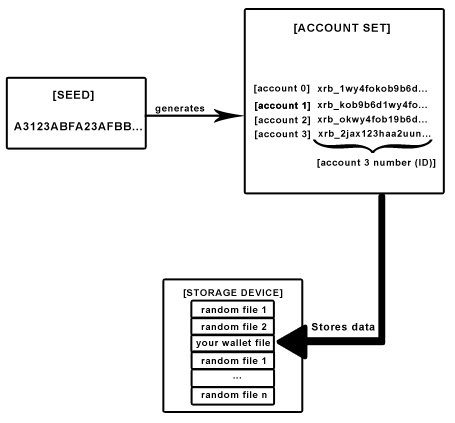
<style>
.page{position:relative;width:455px;height:423px;background:#ffffff}
.page>*{position:absolute;margin:0}
.t1{font:11.4px "Arial-BoldMT";letter-spacing:0.055em;color:#000000}
.t2{font:9.6px "Arial-BoldMT";letter-spacing:0.055em;color:#000000}
.t3{font:11.4px/31.5px "Arial-BoldMT";letter-spacing:0.055em;color:#000000}
.t4{font:131.4px "Centaur";letter-spacing:0.055em;color:#000000;scale:0.38 1}
.t5{font:10.6px "Arial-BoldMT";letter-spacing:0.055em;color:#000000}
.t6{font:9.6px "Arial-BoldMT";letter-spacing:0.055em}
</style>
<div class="page">
<p class="t1" style="left:294px;top:23px;width:96px;height:11px">[ACCOUNT SET]</p>
<p class="t2" style="left:254px;top:84px;width:56px;height:10px">[account 0]</p>
<p class="t2" style="left:317px;top:85px;width:110px;height:9px">xrb_1wy4fokob9b6d...</p>
<p class="t3" style="left:14px;top:90px;width:128px;height:41px">[SEED]<br>A3123ABFA23AFBB...</p>
<p class="t2" style="left:255px;top:102px;width:55px;height:9px">[account 1]</p>
<p class="t2" style="left:255px;top:102px;width:55px;height:9px">[account 1]</p>
<p class="t2" style="left:317px;top:101px;width:110px;height:9px">xrb_kob9b6d1wy4fo...</p>
<p class="t2" style="left:155px;top:104px;width:50px;height:10px">generates</p>
<p class="t2" style="left:255px;top:116px;width:55px;height:10px">[account 2]</p>
<p class="t2" style="left:317px;top:115px;width:110px;height:10px">xrb_okwy4fob19b6d...</p>
<p class="t2" style="left:255px;top:130px;width:55px;height:10px">[account 3]</p>
<p class="t2" style="left:318px;top:130px;width:113px;height:9px">xrb_2jax123haa2uun...</p>
<p class="t4" style="left:313px;top:139px;width:120px;height:14px;rotate:90deg">}</p>
<p class="t2" style="left:317px;top:159px;width:119px;height:9px">[account 3 number (ID)]</p>
<p class="t2" style="left:183px;top:289px;width:100px;height:9px">[STORAGE DEVICE]</p>
<p class="t2" style="left:201px;top:306px;width:65px;height:7px">random file 1</p>
<p class="t2" style="left:201px;top:323px;width:66px;height:7px">random file 2</p>
<p class="t5" style="left:311px;top:323px;width:64px;height:8px">Stores data</p>
<p class="t2" style="left:196px;top:339px;width:74px;height:9px">your wallet file</p>
<p class="t2" style="left:201px;top:357px;width:65px;height:7px">random file 1</p>
<p class="t6" style="left:233px;top:377px;width:8px;height:2px">...</p>
<p class="t2" style="left:201px;top:391px;width:66px;height:7px">random file n</p>
</div>
